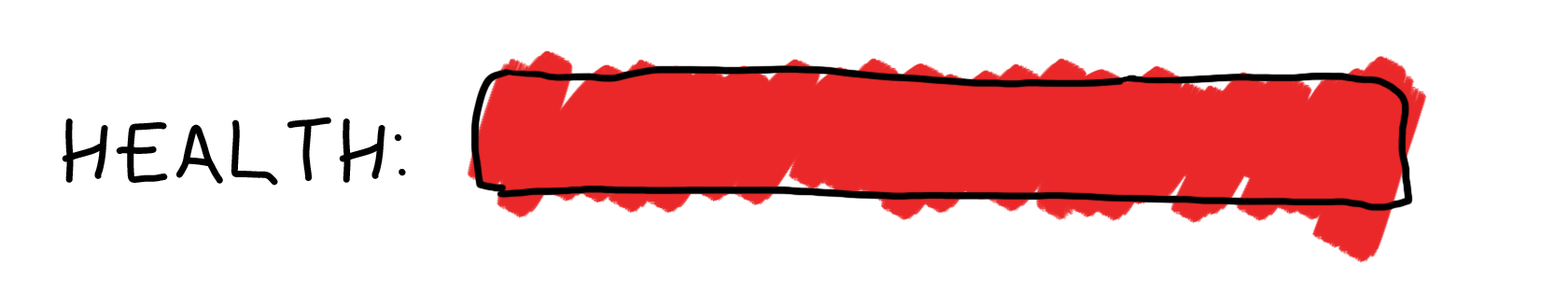
<style>
.page{position:relative;width:1568px;height:292px;background:#ffffff}
.page>*{position:absolute;margin:0}
.t1{font:90.4px "kindergarten";color:#000000}
</style>
<div class="page">
<p class="t1" style="left:62px;top:117px;width:344px;height:69px">HEALTH:</p>
</div>
